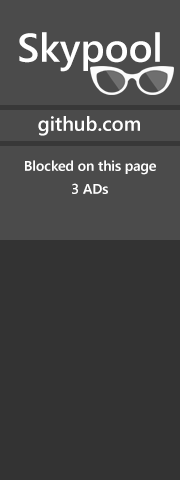
<style>
.page{position:relative;width:180px;height:480px;background:#333333}
.page>*{position:absolute;margin:0}
.t1{font:40px "SegoeUI-Semibold";color:#ffffff}
.t2{font:20px "SegoeUI-Semibold";color:#ffffff}
.t3{font:14px "SegoeUI-Semibold";color:#ffffff}
</style>
<div class="page">
<p class="t1" style="left:19px;top:32px;width:141px;height:40px">Skypool</p>
<p class="t2" style="left:38px;top:116px;width:102px;height:20px">github.com</p>
<p class="t3" style="left:25px;top:160px;width:131px;height:15px">Blocked on this page</p>
<p class="t3" style="left:72px;top:183px;width:36px;height:11px">3 ADs</p>
</div>
